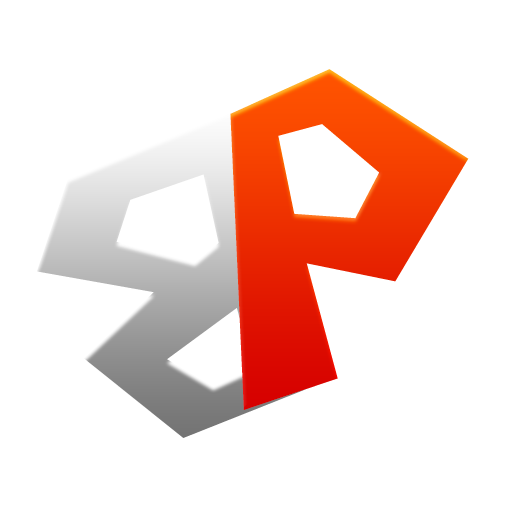
<style>
.page{position:relative;width:512px;height:512px;background:#ffffff}
.page>*{position:absolute;margin:0}
.t1{font:425px "FreakyPaperCutouts";letter-spacing:0.02em}
.t2{font:408.2px "FreakyPaperCutouts";letter-spacing:0.02em;scale:1.07 1}
</style>
<div class="page">
<p class="t1" style="left:230px;top:69px;width:239px;height:341px">P</p>
<p class="t2" style="left:37px;top:103px;width:269px;height:335px;rotate:175deg">B</p>
</div>
